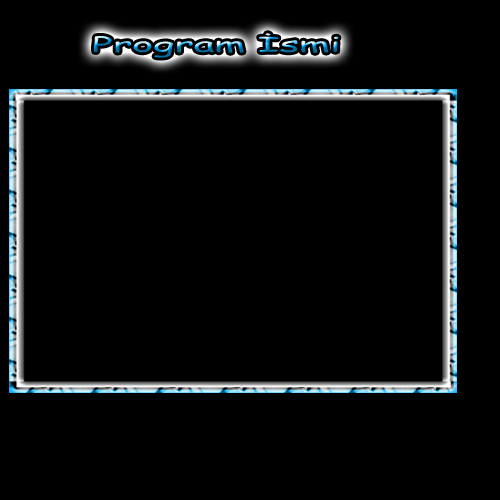
<style>
.page{position:relative;width:500px;height:500px;background:#000000}
.page>*{position:absolute;margin:0}
.t1{font:20.4px "ComicSansMS";scale:1.97 1}
</style>
<div class="page">
<p class="t1" style="left:94px;top:33px;width:245px;height:25px">Program İsmi</p>
</div>
